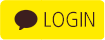
<style>
.page{position:relative;width:105px;height:40px;background:#ffeb00}
.page>*{position:absolute;margin:0}
.t1{font:20px "NanumGothic";letter-spacing:0.005em;color:#3c1e1e;scale:0.87 1}
</style>
<div class="page">
<p class="t1" style="left:44px;top:11px;width:51px;height:17px">LOGIN</p>
</div>
